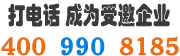
<style>
.page{position:relative;width:180px;height:56px;background:#ffffff}
.page>*{position:absolute;margin:0}
.t1{font:24.2px "STHupo";color:#393c3e;scale:0.73 1}
.t2{font:24.7px "CheltenhamBT-BoldHeadline";color:#eb6e12;font-weight:bold;scale:1.07 1}
.t3{font:24.7px "CheltenhamBT-BoldHeadline";color:#0a81dd;text-transform:uppercase;font-weight:bold;scale:1.07 1}
</style>
<div class="page">
<p class="t1" style="left:8px;top:3px;width:162px;height:24px">打电话 成为受邀企业</p>
<p class="t2" style="left:1px;top:37px;width:45px;height:19px">400</p>
<p class="t3" style="left:61px;top:37px;width:44px;height:19px">990</p>
<p class="t2" style="left:120px;top:36px;width:59px;height:20px">8185</p>
</div>
